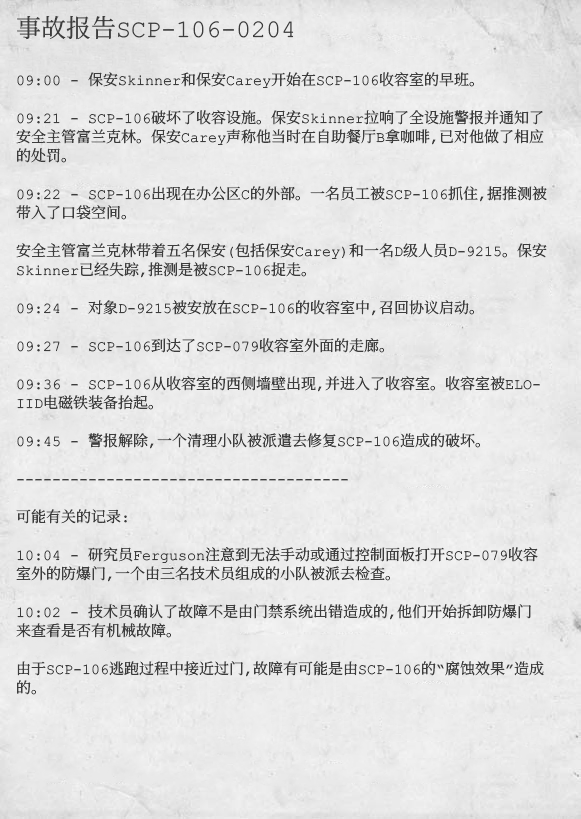
<style>
.page{position:relative;width:581px;height:819px}
.page>*{position:absolute;margin:0}
.t1{font:15px/19px "ContainmentBreach-Regular";color:#3d3d3d}
.t2{font:25px/19px "ContainmentBreach-Regular";color:#3d3d3d}
</style>
<div class="page">
<p class="t1" style="left:16px;top:15px;width:531px;height:680px"><span class="t2">事故报告SCP-106-0204<br><br><br></span>09:00 - 保安Skinner和保安Carey开始在SCP-106收容室的早班。<br><br>09:21 - SCP-106破坏了收容设施。保安Skinner拉响了全设施警报并通知了<br>安全主管富兰克林。保安Carey声称他当时在自助餐厅B拿咖啡，已对他做了相应<br>的处罚。<br><br>09:22 - SCP-106出现在办公区C的外部。一名员工被SCP-106抓住，据推测被<br>带入了口袋空间。<br><br>安全主管富兰克林带着五名保安（包括保安Carey）和一名D级人员D-9215。保安<br>Skinner已经失踪，推测是被SCP-106捉走。<br><br>09:24 - 对象D-9215被安放在SCP-106的收容室中，召回协议启动。<br><br>09:27 - SCP-106到达了SCP-079收容室外面的走廊。<br><br>09:36 - SCP-106从收容室的西侧墙壁出现，并进入了收容室。收容室被ELO-<br>IID电磁铁装备抬起。<br><br>09:45 - 警报解除，一个清理小队被派遣去修复SCP-106造成的破坏。<br><br>-------------------------------------<br><br>可能有关的记录：<br><br>10:04 - 研究员Ferguson注意到无法手动或通过控制面板打开SCP-079收容<br>室外的防爆门，一个由三名技术员组成的小队被派去检查。<br><br>10：02 - 技术员确认了故障不是由门禁系统出错造成的，他们开始拆卸防爆门<br>来查看是否有机械故障。<br><br>由于SCP-106逃跑过程中接近过门，故障有可能是由SCP-106的“腐蚀效果”造成<br>的。</p>
</div>
